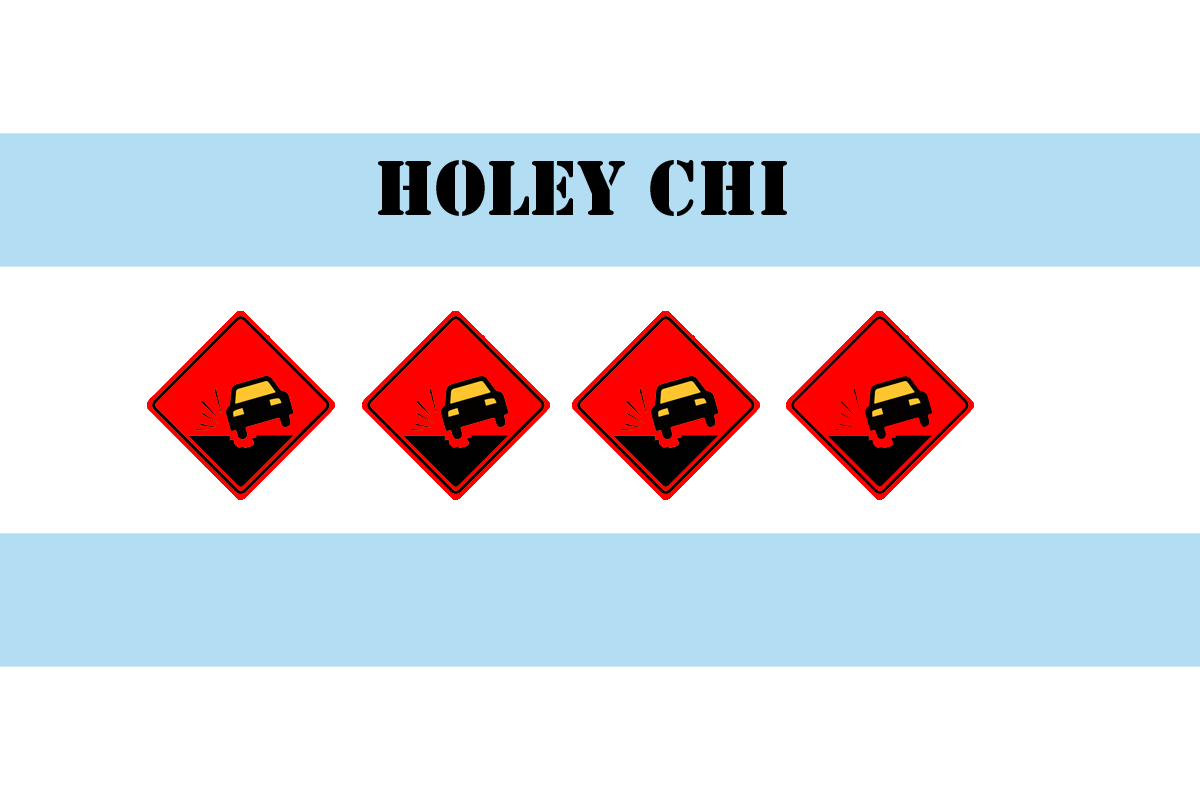
<style>
.page{position:relative;width:1200px;height:800px;background:#ffffff}
.page>*{position:absolute;margin:0}
.t1{font:72px "StencilStd";color:#000000}
</style>
<div class="page">
<p class="t1" style="left:378px;top:160px;width:409px;height:56px">Holey Chi</p>
</div>
